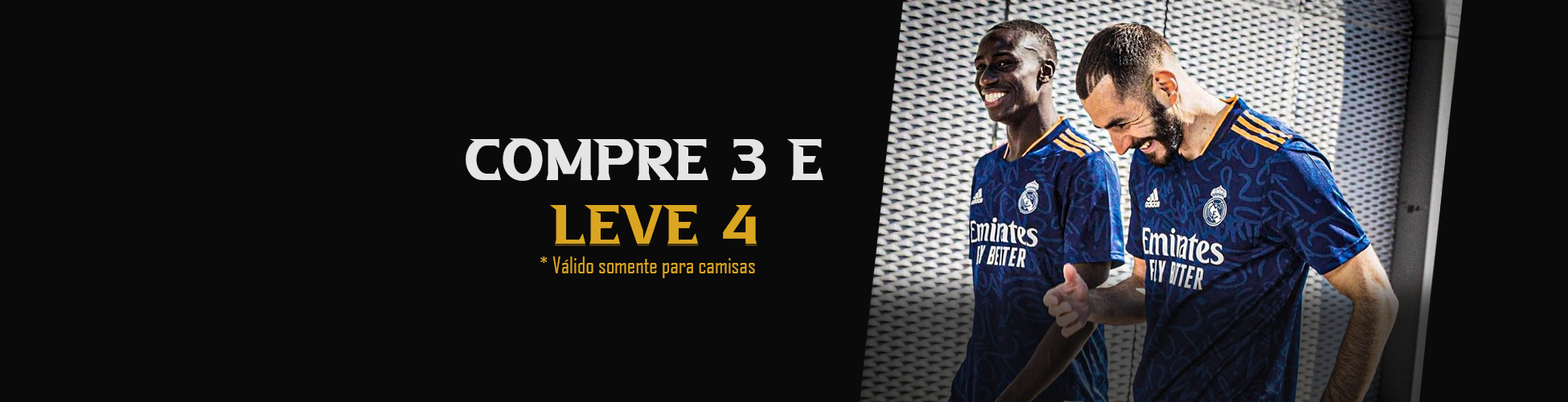
<style>
.page{position:relative;width:1568px;height:402px;background:#0a0a0a}
.page>*{position:absolute;margin:0}
.t1{font:55.1px "aAbsoluteEmpire";color:#e5e5e5}
.t2{font:55.1px "aAbsoluteEmpire";color:#daa521}
.t3{font:22.3px "AgencyFB-Reg";color:#daa521}
</style>
<div class="page">
<p class="t1" style="left:466px;top:138px;width:357px;height:108px;text-align:center">Compre 3 e <br><span class="t2">leve 4</span></p>
<p class="t3" style="left:540px;top:257px;width:215px;height:21px">* Válido somente para camisas</p>
</div>
